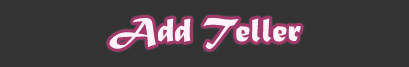
<style>
.page{position:relative;width:409px;height:67px;background:#333333}
.page>*{position:absolute;margin:0}
.t1{font:35.1px "MaturaMTScriptCapitals";color:#fcf2f7}
</style>
<div class="page">
<p class="t1" style="left:109px;top:18px;width:192px;height:31px">Add Teller</p>
</div>
